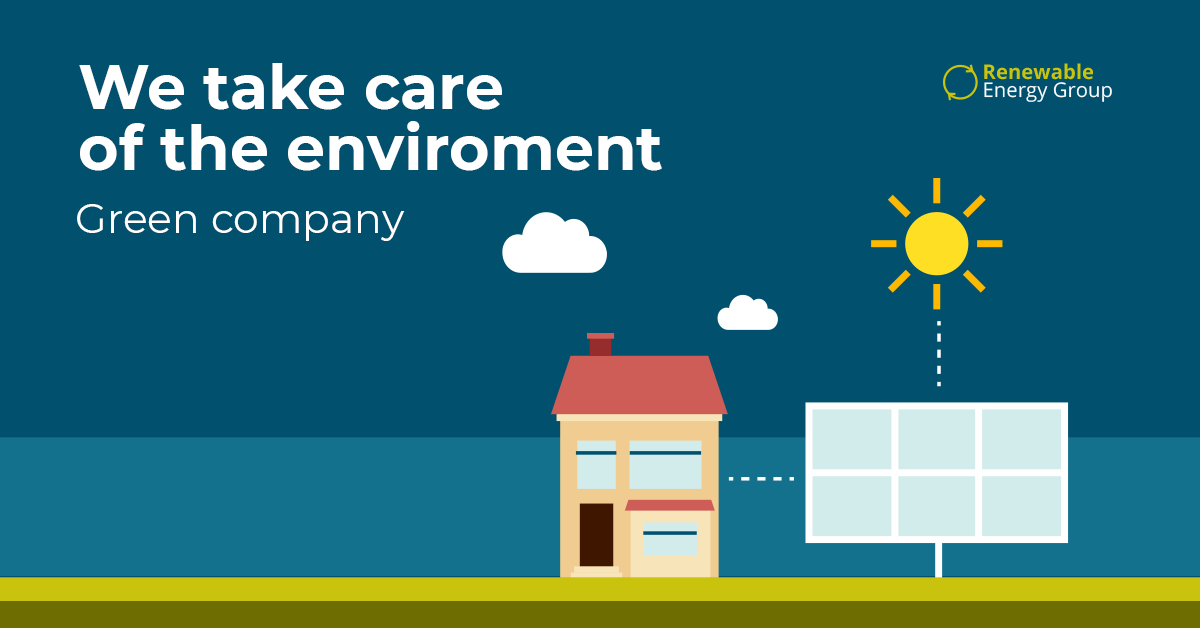
<style>
.page{position:relative;width:1200px;height:628px;background:#00506e}
.page>*{position:absolute;margin:0}
.t1{font:61.8px/61.2px "Montserrat-Bold";color:#ffffff}
.t2{font:40.9px "Montserrat-Regular";color:#ffffff}
</style>
<div class="page">
<p class="t1" style="left:79px;top:63px;width:583px;height:108px">We take care<br>of the enviroment</p>
<p class="t2" style="left:77px;top:204px;width:328px;height:37px">Green company</p>
</div>
